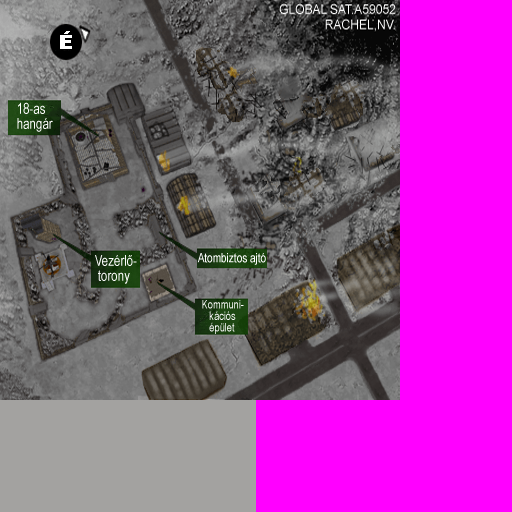
<style>
.page{position:relative;width:512px;height:512px;background:#ff00ff}
.page>*{position:absolute;margin:0}
.t1{font:15px/15px "ArialNarrow";color:#ffffff;scale:0.94 1}
.t2{font:13px "ArialNarrow";color:#ffffff;scale:0.94 1}
.t3{font:12px/11.5px "ArialNarrow";color:#ffffff;scale:0.94 1}
</style>
<div class="page">
<p class="t1" style="left:17px;top:102px;width:36px;height:30px">18-as<br>hangár</p>
<p class="t1" style="left:95px;top:255px;width:42px;height:29px">Vezérlő-<br> torony</p>
<p class="t2" style="left:197px;top:253px;width:69px;height:12px">Atombiztos ajtó</p>
<p class="t3" style="left:202px;top:300px;width:42px;height:34px">Kommuni-<br>   kációs<br>   épület</p>
</div>
